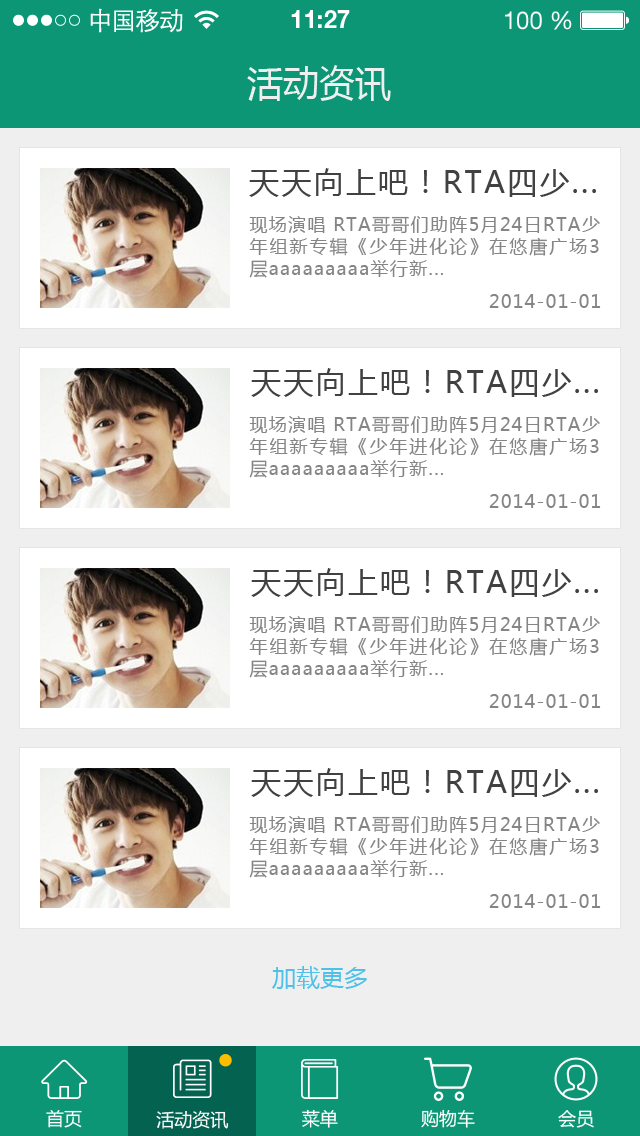
<style>
.page{position:relative;width:640px;height:1136px;background:#ffffff}
.page>*{position:absolute;margin:0}
.t1{font:25px "STXihei";letter-spacing:-0.045em;color:#fefefe}
.t2{font:24.6px "HelveticaNeueLTPro-Bd";color:#ffffff}
.t3{font:24.6px "HelveticaNeueLTStd-Roman";color:#ffffff}
.t4{font:36px "MicrosoftYaHei";color:#efefef}
.t5{font:30px "MicrosoftYaHei";letter-spacing:0.075em;color:#414141}
.t6{font:18px "MicrosoftYaHei";letter-spacing:0.075em;color:#858585}
.t7{font:24px "MicrosoftYaHei";color:#4fc1e9}
.t8{font:18px "MicrosoftYaHei";color:#ffffff}
</style>
<div class="page">
<p class="t1" style="left:90px;top:8px;width:93px;height:25px">中国移动</p>
<p class="t2" style="left:291px;top:10px;width:59px;height:18px">11:27</p>
<p class="t3" style="left:505px;top:11px;width:67px;height:19px">100 %</p>
<p class="t4" style="left:247px;top:65px;width:144px;height:36px">活动资讯</p>
<p class="t5" style="left:249px;top:168px;width:347px;height:29px">天天向上吧！RTA四少...</p>
<p class="t6" style="left:249px;top:216px;width:351px;height:62px;text-align:justify">现场演唱 RTA哥哥们助阵5月24日RTA少年组新专辑《少年进化论》在悠唐广场3层aaaaaaaaa举行新...</p>
<p class="t6" style="left:489px;top:294px;width:112px;height:14px">2014-01-01</p>
<p class="t5" style="left:251px;top:368px;width:347px;height:29px">天天向上吧！RTA四少...</p>
<p class="t6" style="left:249px;top:416px;width:351px;height:62px;text-align:justify">现场演唱 RTA哥哥们助阵5月24日RTA少年组新专辑《少年进化论》在悠唐广场3层aaaaaaaaa举行新...</p>
<p class="t6" style="left:489px;top:494px;width:112px;height:14px">2014-01-01</p>
<p class="t5" style="left:251px;top:568px;width:347px;height:29px">天天向上吧！RTA四少...</p>
<p class="t6" style="left:249px;top:616px;width:351px;height:62px;text-align:justify">现场演唱 RTA哥哥们助阵5月24日RTA少年组新专辑《少年进化论》在悠唐广场3层aaaaaaaaa举行新...</p>
<p class="t6" style="left:489px;top:694px;width:112px;height:14px">2014-01-01</p>
<p class="t5" style="left:251px;top:768px;width:347px;height:29px">天天向上吧！RTA四少...</p>
<p class="t6" style="left:249px;top:816px;width:351px;height:62px;text-align:justify">现场演唱 RTA哥哥们助阵5月24日RTA少年组新专辑《少年进化论》在悠唐广场3层aaaaaaaaa举行新...</p>
<p class="t6" style="left:489px;top:894px;width:112px;height:14px">2014-01-01</p>
<p class="t7" style="left:272px;top:966px;width:95px;height:23px">加载更多</p>
<p class="t8" style="left:46px;top:1110px;width:36px;height:18px">首页</p>
<p class="t8" style="left:156px;top:1110px;width:73px;height:19px">活动资讯</p>
<p class="t8" style="left:302px;top:1109px;width:36px;height:19px">菜单</p>
<p class="t8" style="left:421px;top:1109px;width:54px;height:19px">购物车</p>
<p class="t8" style="left:558px;top:1110px;width:36px;height:18px">会员</p>
</div>
